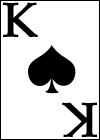
<style>
.page{position:relative;width:100px;height:140px;background:#ffffff}
.page>*{position:absolute;margin:0}
.t1{font:48px "PalatinoLinotype-Roman";color:#000000;font-weight:bold}
</style>
<div class="page">
<p class="t1" style="left:3px;top:2px;width:35px;height:35px">K</p>
<p class="t1" style="left:62px;top:102px;width:35px;height:35px;rotate:180deg">K</p>
</div>
